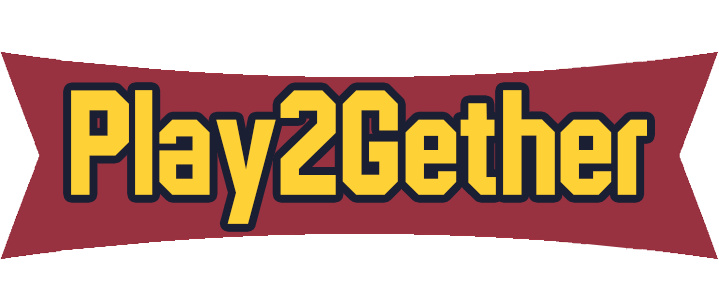
<style>
.page{position:relative;width:719px;height:300px;background:#ffffff}
.page>*{position:absolute;margin:0}
.t1{font:160px "CollegeRegular";color:#fed136}
</style>
<div class="page">
<p class="t1" style="left:71px;top:90px;width:576px;height:134px">Play2Gether</p>
</div>
